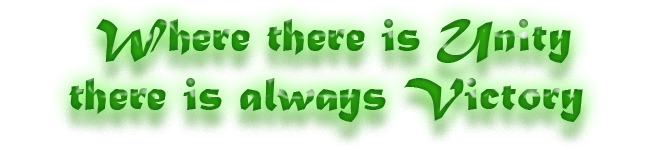
<style>
.page{position:relative;width:660px;height:150px;background:#ffffff}
.page>*{position:absolute;margin:0}
.t1{font:49px "MaturaMTScriptCapitals";color:#23880d}
</style>
<div class="page">
<p class="t1" style="left:69px;top:19px;width:514px;height:103px;text-align:center">Where there is Unity<br>there is always Victory</p>
</div>
